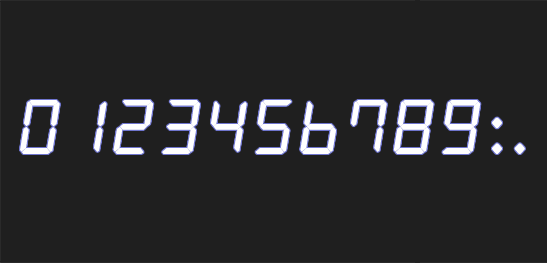
<style>
.page{position:relative;width:547px;height:263px;background:#1f1f1f}
.page>*{position:absolute;margin:0}
.t1{font:76.3px "alarmclock";color:#ffffff;font-weight:bold}
</style>
<div class="page">
<p class="t1" style="left:20px;top:100px;width:505px;height:54px">0123456789:.</p>
</div>
